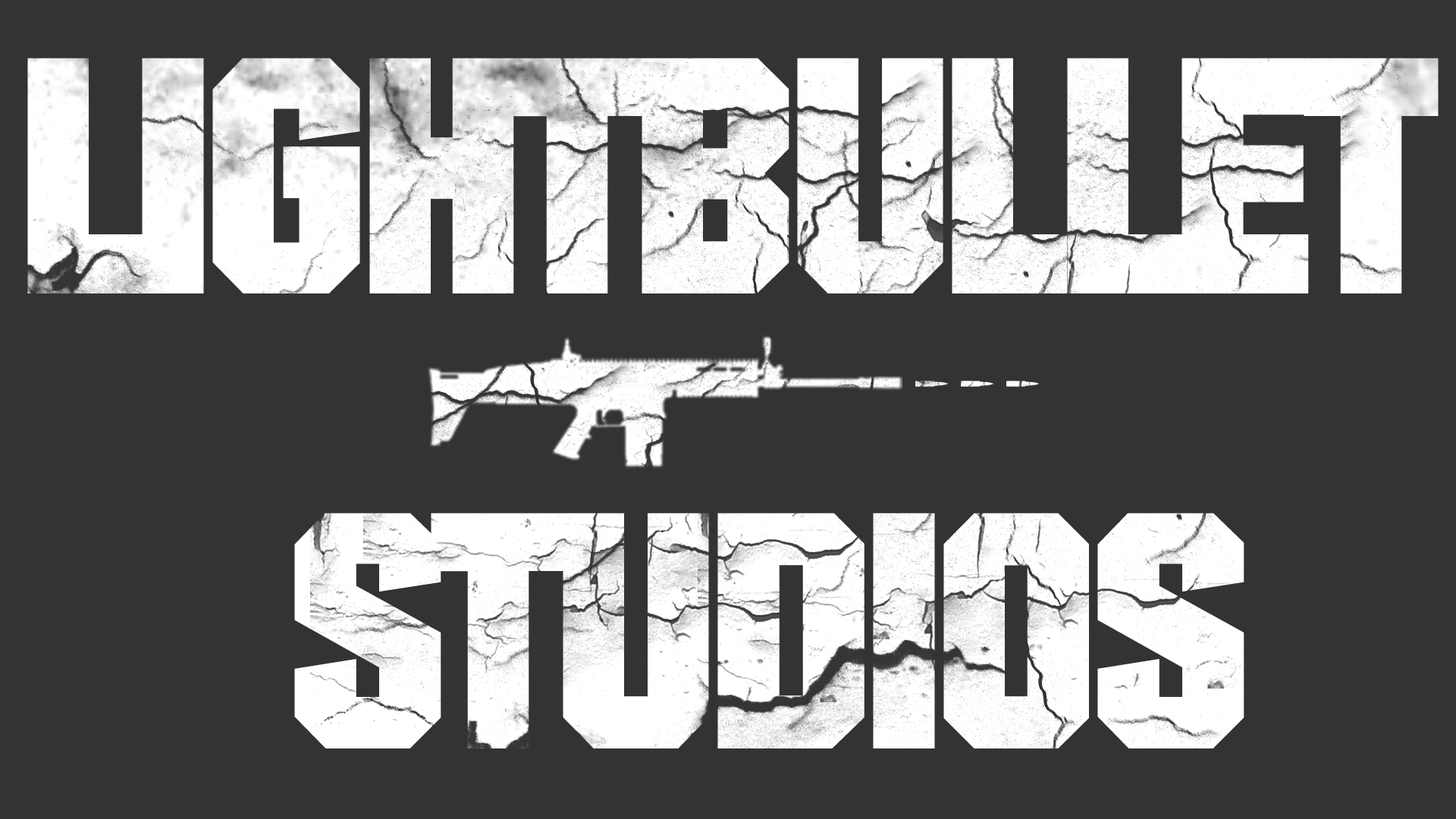
<style>
.page{position:relative;width:1456px;height:819px;background:#333333}
.page>*{position:absolute;margin:0}
.t1{font:326.4px "Diamante-Serial-Heavy-Regular";letter-spacing:-0.03em;color:#ffffff;text-transform:uppercase}
</style>
<div class="page">
<p class="t1" style="left:27px;top:58px;width:1412px;height:235px">Lightbullet</p>
<p class="t1" style="left:294px;top:513px;width:950px;height:235px">studios</p>
</div>
